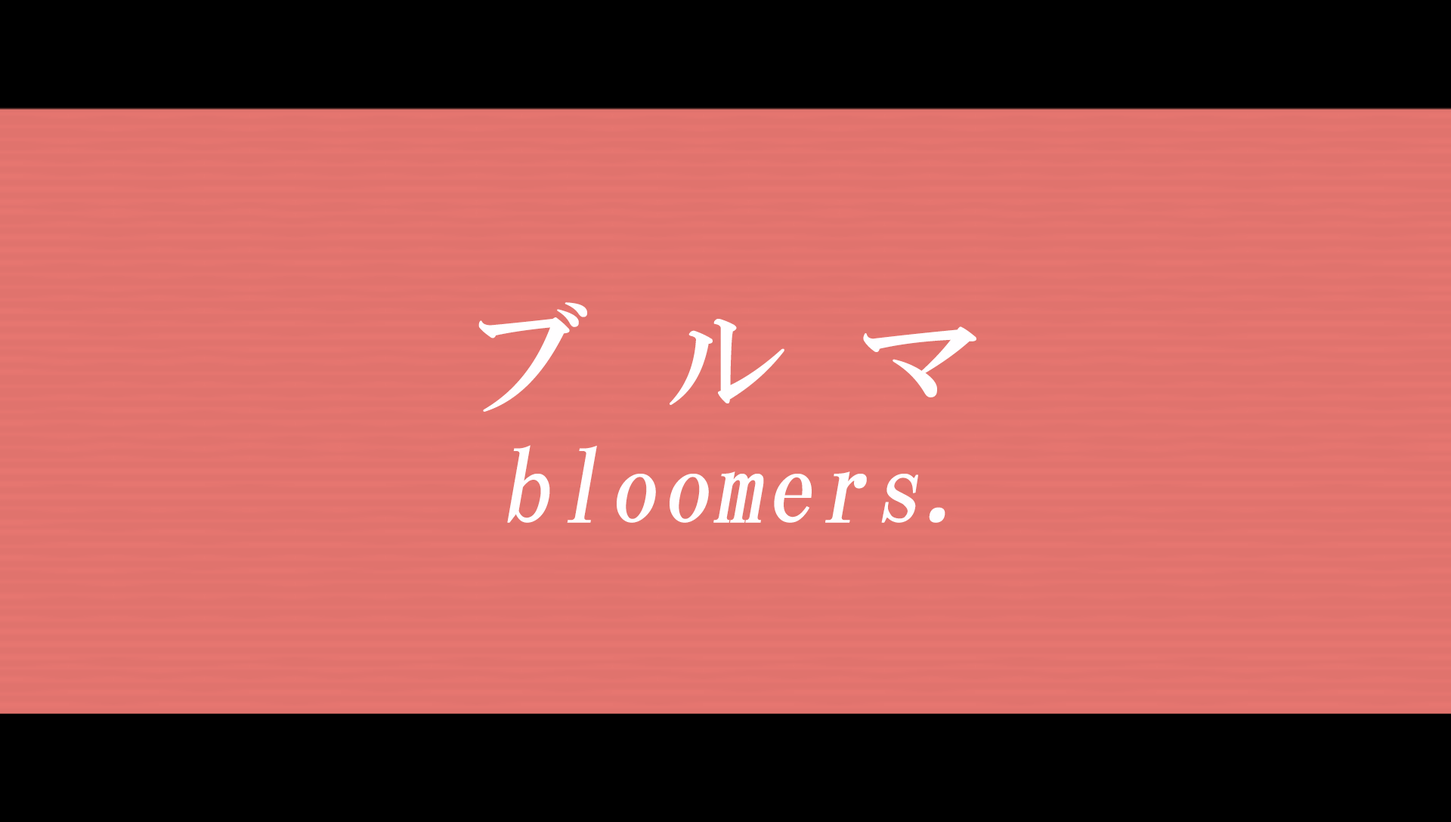
<style>
.page{position:relative;width:1451px;height:822px;background:#e0736d}
.page>*{position:absolute;margin:0}
.t1{font:126.9px "HGMinchoB";letter-spacing:0.55em;color:#fffeff}
.t2{font:100.7px "HGMinchoB";letter-spacing:0.025em;color:#fffeff;font-style:italic}
</style>
<div class="page">
<p class="t1" style="left:478px;top:302px;width:498px;height:110px">ブルマ</p>
<p class="t2" style="left:507px;top:445px;width:438px;height:78px">bloomers.</p>
</div>
